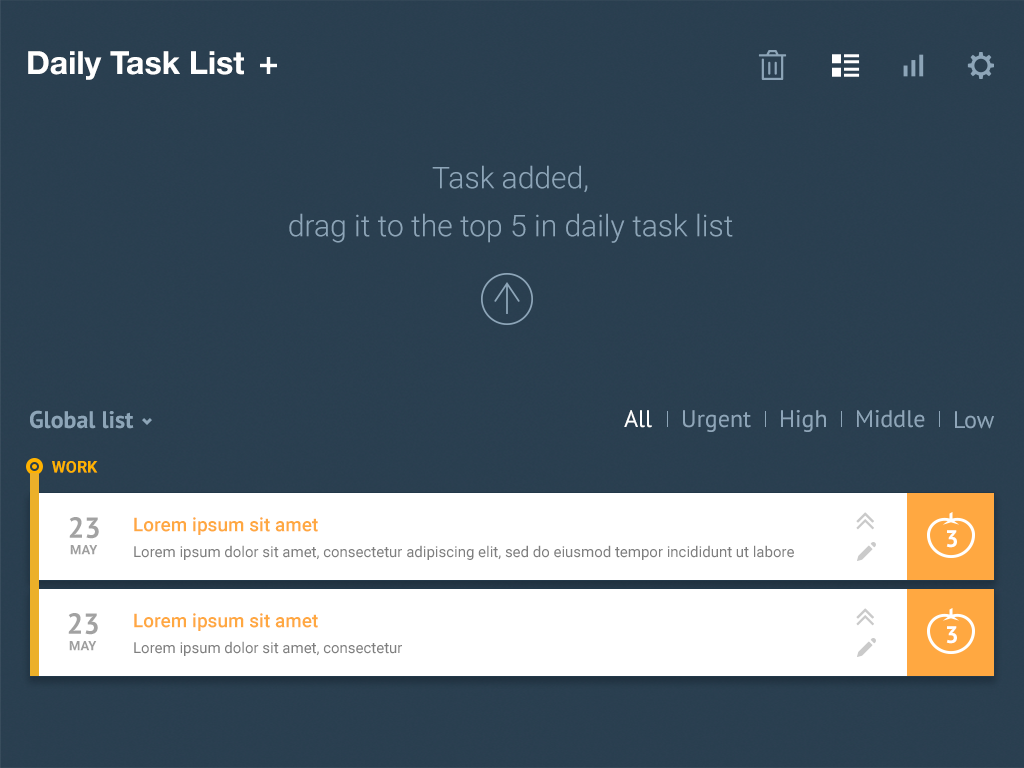
<style>
.page{position:relative;width:1024px;height:768px;background:#2a3f50}
.page>*{position:absolute;margin:0}
.t1{font:32px "HelveticaNeue-Bold";color:#ffffff}
.t2{font:30px/48px "Roboto-Light";color:#8da5b8}
.t3{font:24px "PTSans-Bold";color:#8da5b8}
.t4{font:24px "PTSans-Regular";color:#ffffff}
.t5{font:24px "PTSans-Regular";color:#8ea5b8}
.t6{font:16px "Roboto-Bold";color:#ffb200}
.t7{font:29px "PTSans-Bold";color:#a2a2a2}
.t8{font:19px "Roboto-Medium";color:#ffa841}
.t9{font:24px "PTSans-Bold";color:#ffffff}
.t10{font:13px "Roboto-Bold";color:#9f9f9f}
.t11{font:15px "Roboto-Regular";color:#7f7f7f}
</style>
<div class="page">
<p class="t1" style="left:28px;top:51px;width:216px;height:29px">Daily Task List</p>
<p class="t2" style="left:289px;top:165px;width:444px;height:78px;text-align:center">Task added,<br>drag it to the top 5 in daily task list</p>
<p class="t3" style="left:30px;top:410px;width:104px;height:19px">Global list</p>
<p class="t4" style="left:624px;top:410px;width:28px;height:18px">All</p>
<p class="t5" style="left:683px;top:410px;width:68px;height:22px">Urgent</p>
<p class="t5" style="left:781px;top:410px;width:45px;height:22px">High</p>
<p class="t5" style="left:857px;top:410px;width:68px;height:18px">Middle</p>
<p class="t5" style="left:955px;top:411px;width:39px;height:18px">Low</p>
<p class="t6" style="left:52px;top:461px;width:46px;height:12px">WORK</p>
<p class="t7" style="left:69px;top:517px;width:30px;height:22px">23</p>
<p class="t8" style="left:134px;top:517px;width:184px;height:18px">Lorem ipsum sit amet</p>
<p class="t9" style="left:946px;top:530px;width:11px;height:18px">3</p>
<p class="t10" style="left:70px;top:545px;width:28px;height:10px">MAY</p>
<p class="t11" style="left:134px;top:545px;width:660px;height:15px">Lorem ipsum dolor sit amet, consectetur adipiscing elit, sed do eiusmod tempor incididunt ut labore</p>
<p class="t7" style="left:68px;top:613px;width:30px;height:22px">23</p>
<p class="t8" style="left:134px;top:613px;width:184px;height:18px">Lorem ipsum sit amet</p>
<p class="t9" style="left:946px;top:626px;width:11px;height:18px">3</p>
<p class="t10" style="left:69px;top:641px;width:28px;height:10px">MAY</p>
<p class="t11" style="left:134px;top:641px;width:268px;height:15px">Lorem ipsum dolor sit amet, consectetur</p>
</div>
